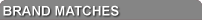
<style>
.page{position:relative;width:202px;height:20px;background:#858585}
.page>*{position:absolute;margin:0}
.t1{font:13.3px "Arial-BoldMT";color:#ffffff}
</style>
<div class="page">
<p class="t1" style="left:3px;top:5px;width:116px;height:11px">BRAND MATCHES</p>
</div>
